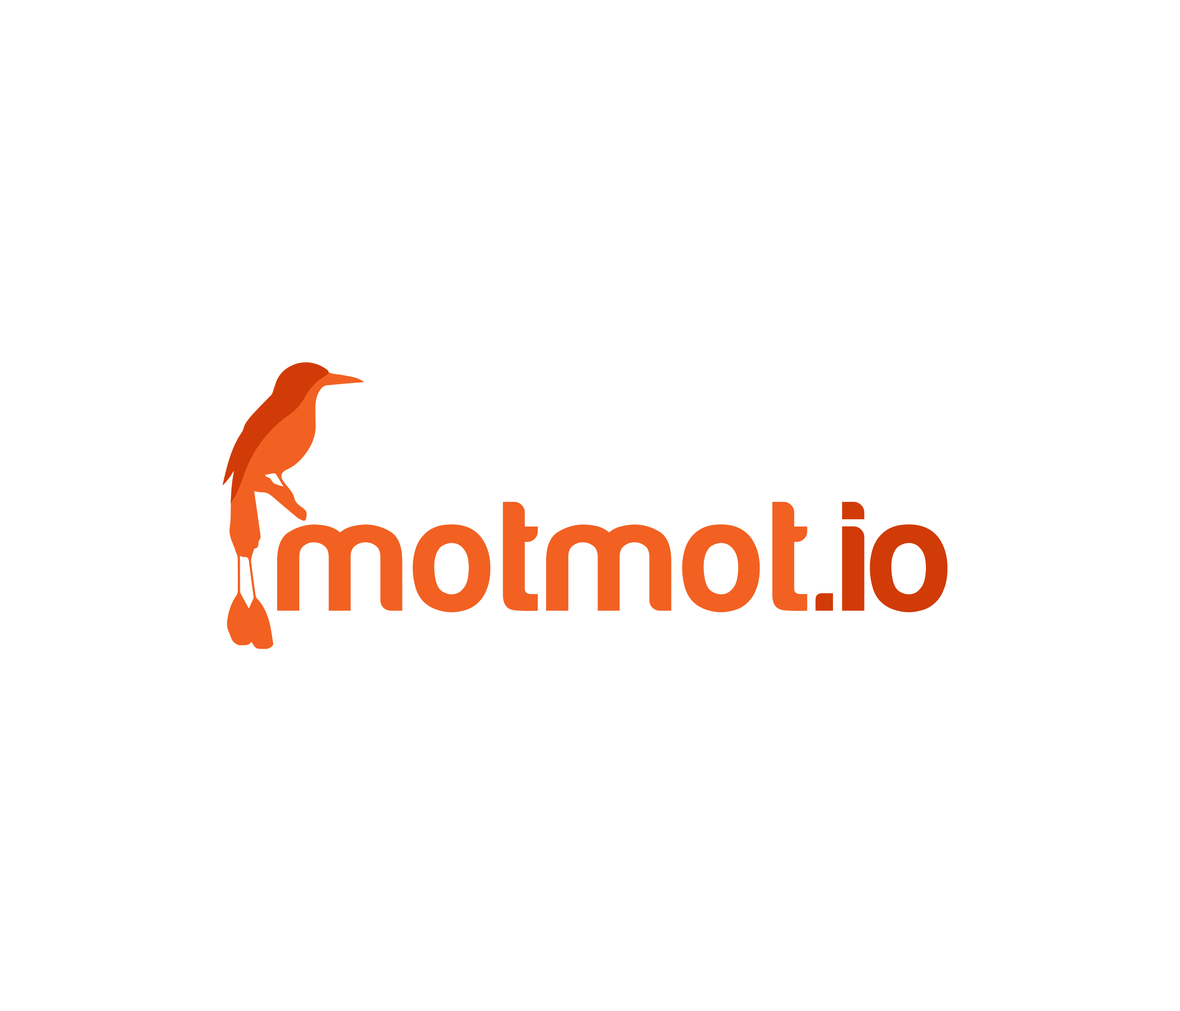
<style>
.page{position:relative;width:1180px;height:1011px;background:#ffffff}
.page>*{position:absolute;margin:0}
.t1{font:162.2px "Harabara";letter-spacing:0.04em;color:#f26122}
.t2{font:162.2px "Harabara";letter-spacing:0.04em;color:#d13b07}
</style>
<div class="page">
<p class="t1" style="left:277px;top:502px;width:670px;height:110px">motmot<span class="t2">.io</span></p>
</div>
